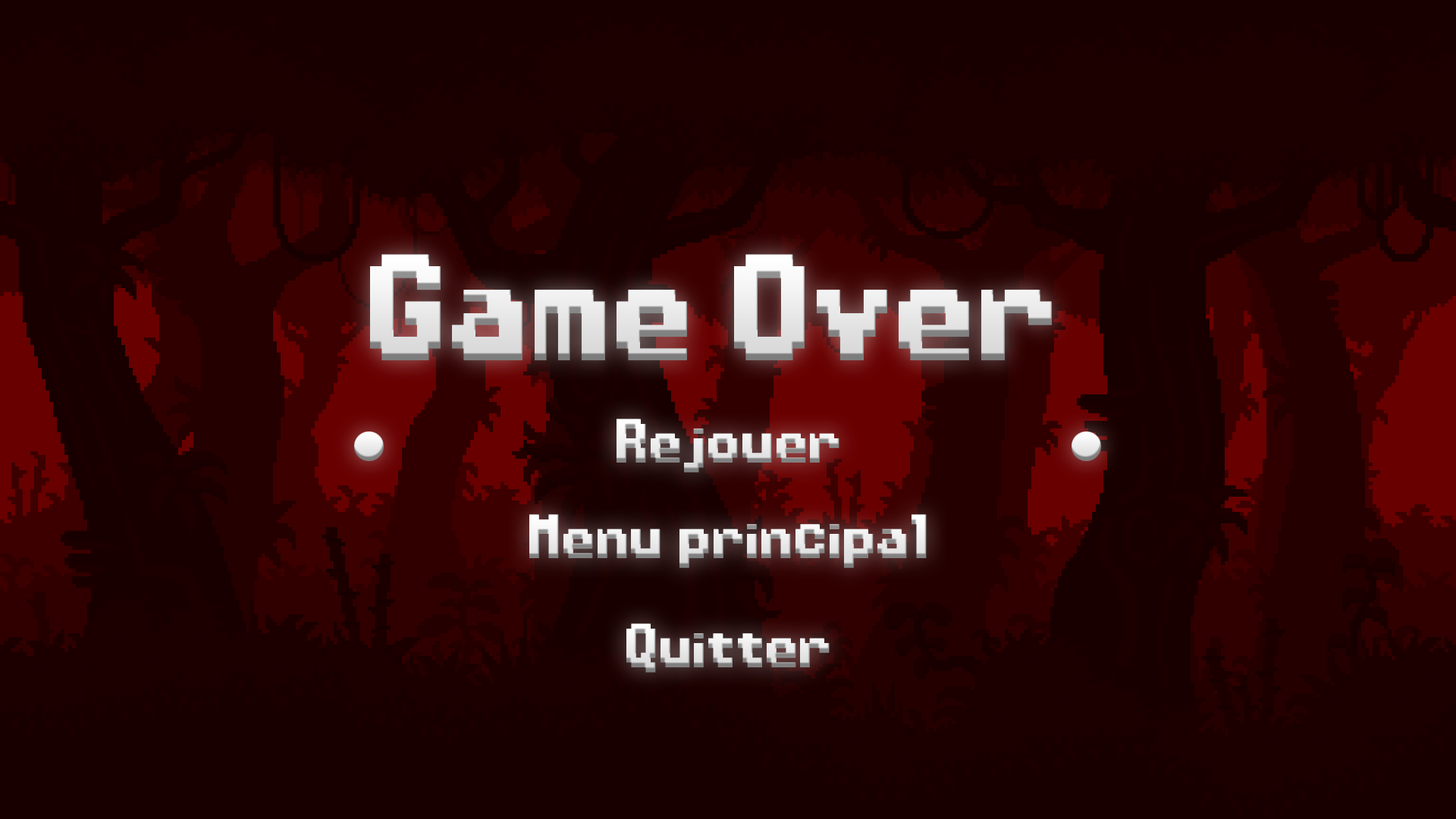
<style>
.page{position:relative;width:1456px;height:819px;background:#180000}
.page>*{position:absolute;margin:0}
.t1{font:153.2px "Power-Clear-Bold";color:#e3e3e3}
.t2{font:63.1px "Power-Clear-Bold"}
</style>
<div class="page">
<p class="t1" style="left:370px;top:254px;width:682px;height:107px">Game Over</p>
<p class="t2" style="left:617px;top:419px;width:222px;height:53px">Rejouer</p>
<p class="t2" style="left:529px;top:514px;width:398px;height:54px">Menu principal</p>
<p class="t2" style="left:626px;top:623px;width:204px;height:50px">Quitter</p>
</div>
